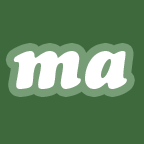
<style>
.page{position:relative;width:144px;height:144px;background:#3e693d}
.page>*{position:absolute;margin:0}
.t1{font:72px "CooperBlackStd-Italic";color:#ffffff}
</style>
<div class="page">
<p class="t1" style="left:13px;top:51px;width:114px;height:38px">ma</p>
</div>
